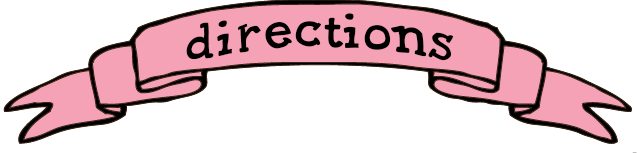
<style>
.page{position:relative;width:637px;height:153px;background:#ffffff}
.page>*{position:absolute;margin:0}
.t1{font:41px "IceCreamSundaes";color:#000000}
</style>
<div class="page">
<p class="t1" style="left:186px;top:13px;width:268px;height:48px">directions</p>
</div>
